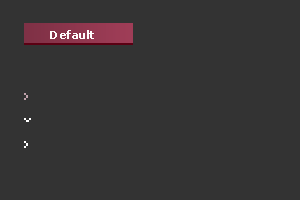
<style>
.page{position:relative;width:300px;height:200px;background:#333333}
.page>*{position:absolute;margin:0}
.t1{font:11px "Verdana-Bold";color:#fffcfc}
</style>
<div class="page">
<p class="t1" style="left:50px;top:30px;width:44px;height:9px">Default</p>
</div>
